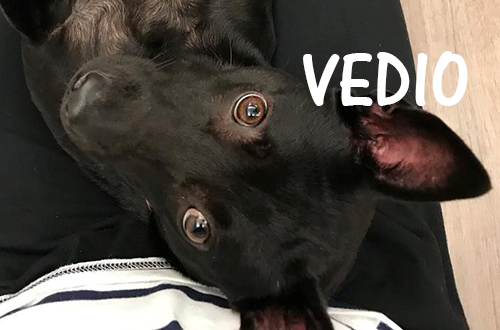
<style>
.page{position:relative;width:500px;height:330px}
.page>*{position:absolute;margin:0}
.t1{font:80px "ARCENA";color:#ffffff}
</style>
<div class="page">
<p class="t1" style="left:303px;top:51px;width:165px;height:55px">VEDIO</p>
</div>
